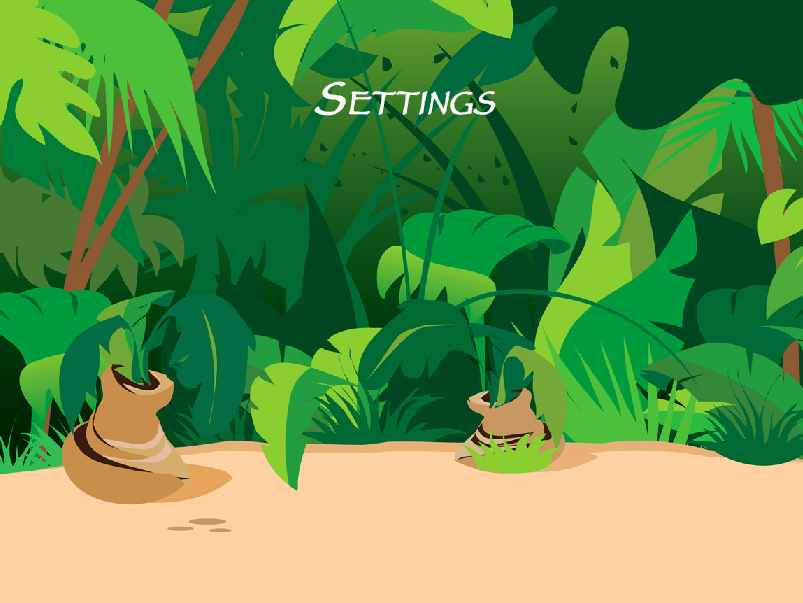
<style>
.page{position:relative;width:803px;height:603px;background:#ffd1a0}
.page>*{position:absolute;margin:0}
.t1{font:47px "Papyrus";color:#f7f7f7;font-variant:small-caps;font-weight:bold;font-style:italic}
</style>
<div class="page">
<p class="t1" style="left:314px;top:81px;width:182px;height:35px">Settings</p>
</div>
